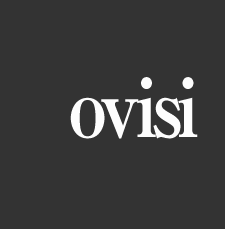
<style>
.page{position:relative;width:225px;height:229px;background:#333333}
.page>*{position:absolute;margin:0}
.t1{font:80px "RyuminPro-ExBold";letter-spacing:-0.08em;color:#fdfdfd;scale:0.9 1}
</style>
<div class="page">
<p class="t1" style="left:70px;top:77px;width:128px;height:62px">ovisi</p>
</div>
